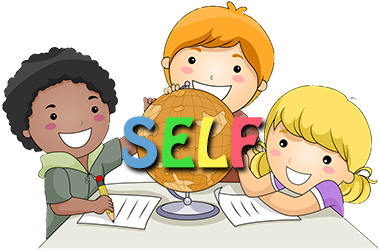
<style>
.page{position:relative;width:379px;height:250px;background:#ffffff}
.page>*{position:absolute;margin:0}
.t1{font:60px "HoboStd";color:#60a3d6}
.t2{font:60px "HoboStd";color:#3fe03f}
.t3{font:60px "HoboStd";color:#faf452}
.t4{font:60px "HoboStd";color:#fb5b71}
</style>
<div class="page">
<p class="t1" style="left:122px;top:116px;width:141px;height:53px">S<span class="t2">E</span><span class="t3">L</span><span class="t4">F</span></p>
</div>
